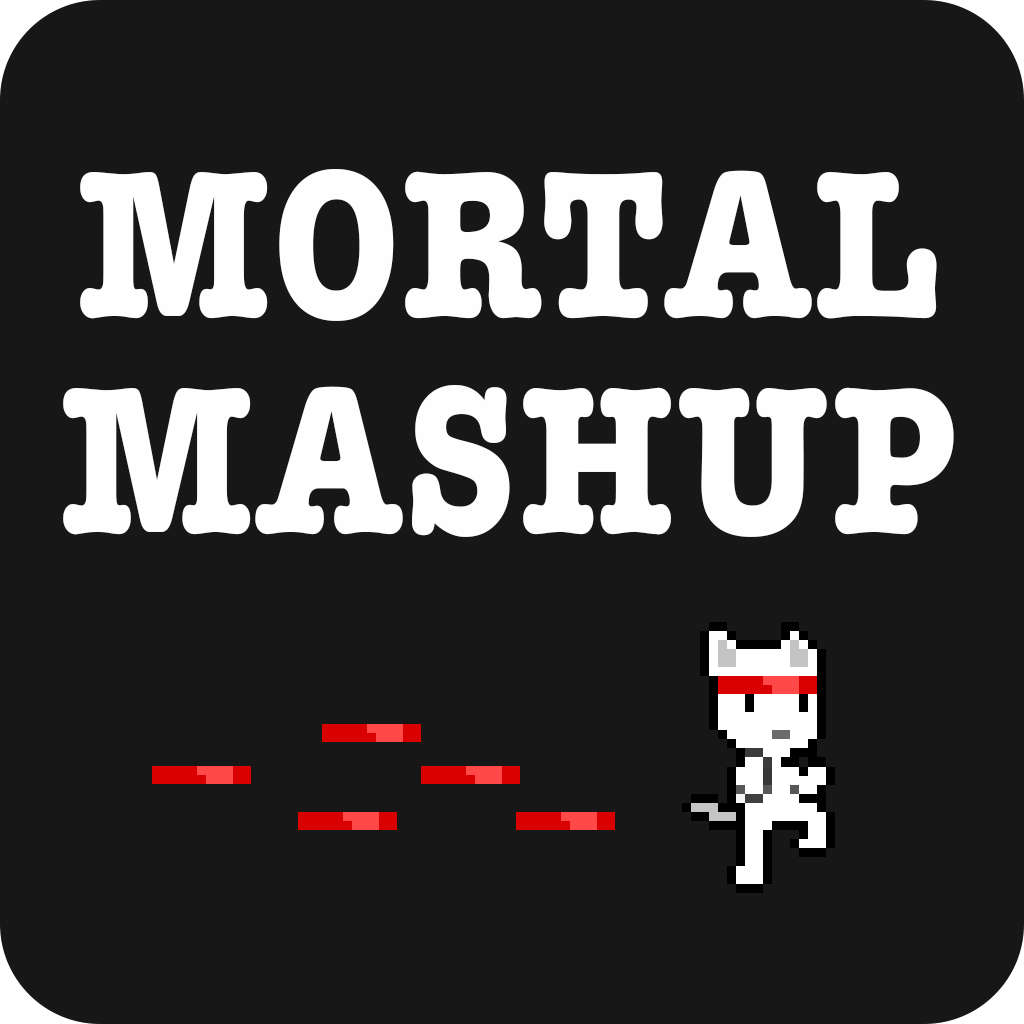
<style>
.page{position:relative;width:1024px;height:1024px;background:#171717}
.page>*{position:absolute;margin:0}
.t1{font:216px "AmericanTypewriter-Bold";letter-spacing:0.02em;color:#fefefe;text-transform:uppercase;scale:0.83 1}
</style>
<div class="page">
<p class="t1" style="left:63px;top:169px;width:891px;height:368px;text-align:center">Mortal<br>Mashup</p>
</div>
